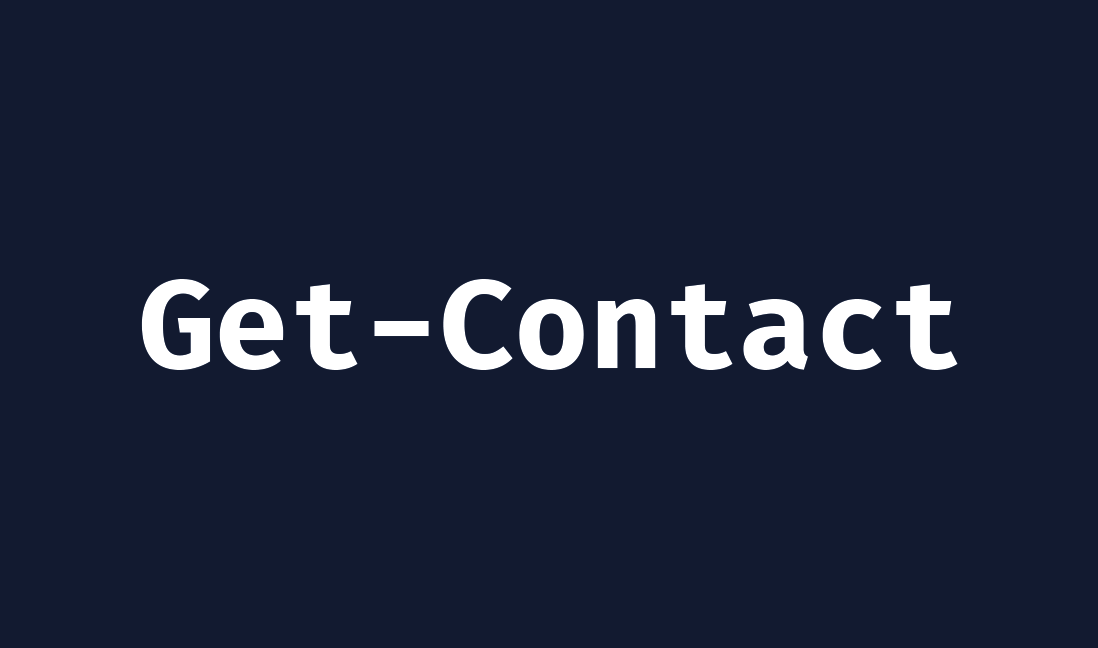
<style>
.page{position:relative;width:1098px;height:648px;background:#121a30}
.page>*{position:absolute;margin:0}
.t1{font:125px "FiraCode-Bold";color:#ffffff}
</style>
<div class="page">
<p class="t1" style="left:141px;top:279px;width:817px;height:91px">Get-Contact</p>
</div>
